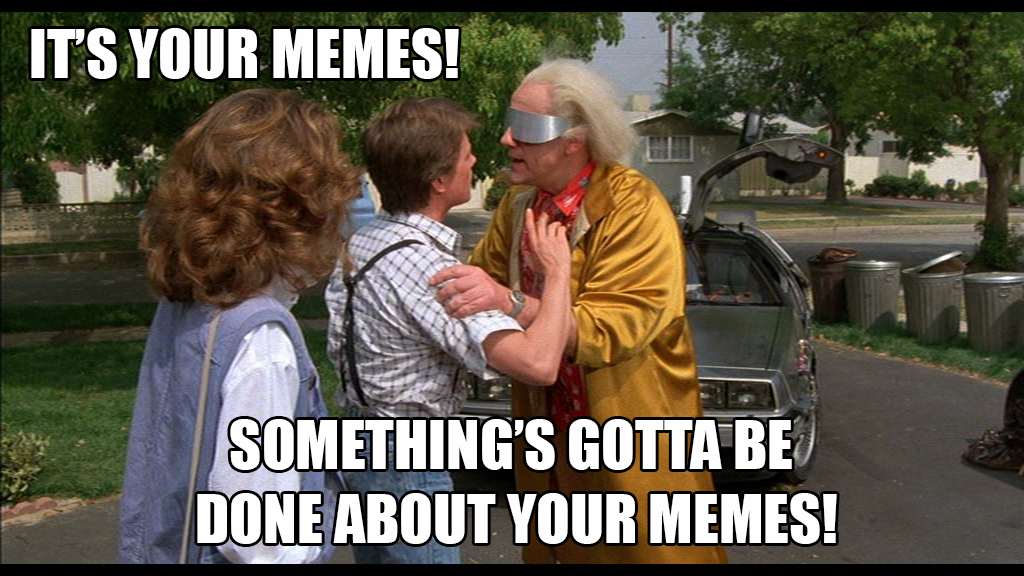
<style>
.page{position:relative;width:1024px;height:576px}
.page>*{position:absolute;margin:0}
.t1{font:62px "Impact";color:#fefefe}
</style>
<div class="page">
<p class="t1" style="left:31px;top:28px;width:428px;height:51px">IT’S YOUR MEMES!</p>
<p class="t1" style="left:197px;top:419px;width:640px;height:125px;text-align:center">SOMETHING’S GOTTA BE <br>DONE ABOUT YOUR MEMES!</p>
</div>
